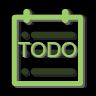
<style>
.page{position:relative;width:96px;height:96px;background:#000000}
.page>*{position:absolute;margin:0}
.t1{font:20.5px "ArialUnicodeMS";color:#9ccc65}
.t2{font:20.5px "ArialUnicodeMS"}
</style>
<div class="page">
<p class="t1" style="left:17px;top:42px;width:60px;height:15px">TODO</p>
<p class="t2" style="left:19px;top:43px;width:59px;height:15px">TODO</p>
</div>
